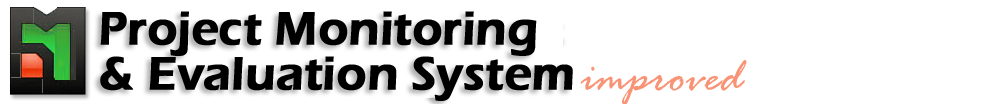
<style>
.page{position:relative;width:1000px;height:104px;background:#ffffff}
.page>*{position:absolute;margin:0}
.t1{font:48px/45px "ErasITC-Demi";letter-spacing:-0.01em;color:#000000;font-weight:bold}
</style>
<div class="page">
<p class="t1" style="left:100px;top:11px;width:473px;height:90px">Project Monitoring<br>&amp; Evaluation System</p>
</div>
